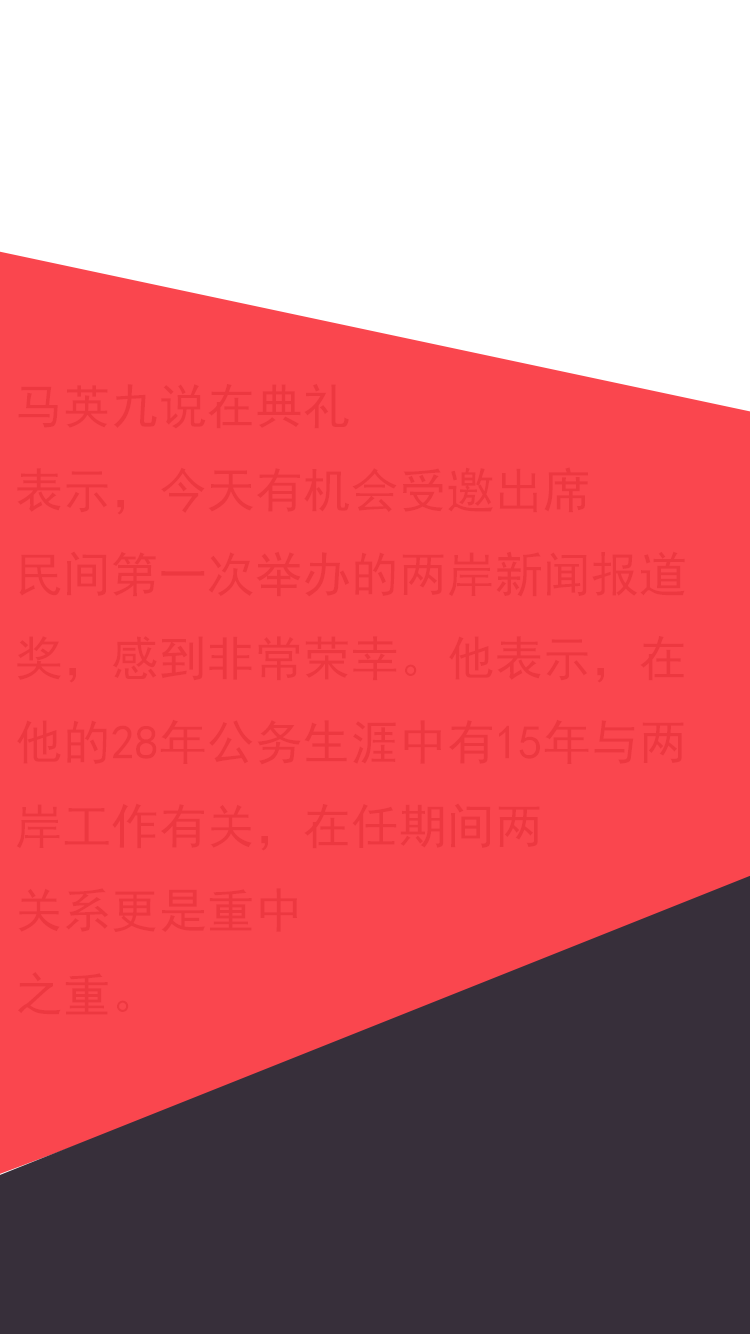
<style>
.page{position:relative;width:750px;height:1334px;background:#fa464e}
.page>*{position:absolute;margin:0}
.t1{font:48px "SimHei";color:#ed3840}
</style>
<div class="page">
<p class="t1" style="left:16px;top:383px;width:669px;height:632px">马英九说在典礼<br>表示，今天有机会受邀出席<br>民间第一次举办的两岸新闻报道<br>奖，感到非常荣幸。他表示，在<br>他的28年公务生涯中有15年与两<br>岸工作有关，在任期间两<br>关系更是重中<br>之重。</p>
</div>
